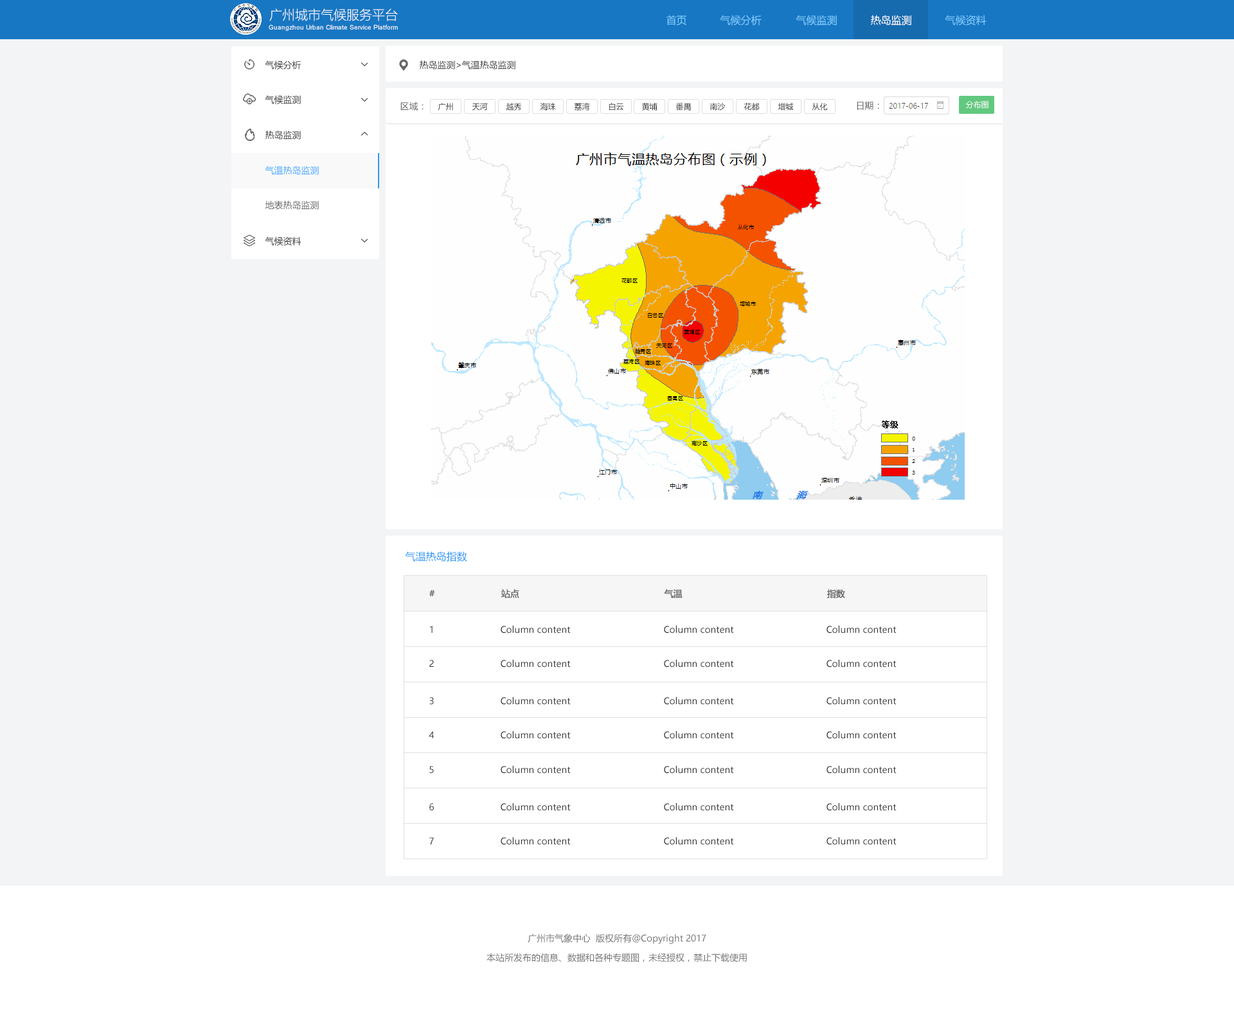
<style>
.page{position:relative;width:1234px;height:1009px;background:#f3f4f5}
.page>*{position:absolute;margin:0}
.t1{font:12.9px "MicrosoftYaHeiLight";color:#ffffff}
.t2{font:10.3px "MicrosoftYaHei";color:#80ceff}
.t3{font:10.3px "MicrosoftYaHei";color:#ffffff}
.t4{font:6.4px "ArialMT";color:#ffffff}
.t5{font:9px "MicrosoftYaHei";color:#333333}
.t6{font:9px "MicrosoftYaHei";color:#666666}
.t7{font:7.7px "MicrosoftYaHei";color:#ffffff}
.t8{font:7.7px "MicrosoftYaHei";color:#333333}
.t9{font:9px "MicrosoftYaHei";color:#3fa9fe}
.t10{font:10.3px "MicrosoftYaHei";color:#2e9af3}
.t11{font:9px "MicrosoftYaHei";color:#666666;font-weight:bold}
.t12{font:9px "MicrosoftYaHei"}
</style>
<div class="page">
<p class="t1" style="left:269px;top:8px;width:129px;height:13px">广州城市气候服务平台</p>
<p class="t2" style="left:667px;top:15px;width:20px;height:11px">首页</p>
<p class="t2" style="left:720px;top:15px;width:42px;height:11px">气候分析</p>
<p class="t2" style="left:796px;top:15px;width:41px;height:11px">气候监测</p>
<p class="t3" style="left:871px;top:15px;width:41px;height:11px">热岛监测</p>
<p class="t2" style="left:945px;top:15px;width:42px;height:11px">气候资料</p>
<p class="t4" style="left:269px;top:24px;width:129px;height:7px">Guangzhou Urban Climate Service Platform</p>
<p class="t5" style="left:265px;top:60px;width:37px;height:9px">气候分析</p>
<p class="t5" style="left:420px;top:60px;width:96px;height:9px">热岛监测&gt;气温热岛监测</p>
<p class="t5" style="left:265px;top:95px;width:36px;height:9px">气候监测</p>
<p class="t6" style="left:401px;top:102px;width:23px;height:9px">区域：</p>
<p class="t6" style="left:857px;top:101px;width:22px;height:9px">日期：</p>
<p class="t7" style="left:966px;top:100px;width:23px;height:9px">分布图</p>
<p class="t8" style="left:438px;top:103px;width:15px;height:8px">广州</p>
<p class="t8" style="left:472px;top:103px;width:16px;height:8px">天河</p>
<p class="t8" style="left:506px;top:103px;width:16px;height:8px">越秀</p>
<p class="t8" style="left:540px;top:103px;width:16px;height:8px">海珠</p>
<p class="t8" style="left:575px;top:103px;width:15px;height:8px">荔湾</p>
<p class="t8" style="left:609px;top:103px;width:15px;height:8px">白云</p>
<p class="t8" style="left:642px;top:103px;width:16px;height:8px">黄埔</p>
<p class="t8" style="left:676px;top:103px;width:15px;height:8px">番禺</p>
<p class="t8" style="left:710px;top:103px;width:16px;height:8px">南沙</p>
<p class="t8" style="left:744px;top:103px;width:16px;height:8px">花都</p>
<p class="t8" style="left:778px;top:103px;width:16px;height:8px">增城</p>
<p class="t8" style="left:812px;top:103px;width:16px;height:8px">从化</p>
<p class="t5" style="left:266px;top:130px;width:35px;height:10px">热岛监测</p>
<p class="t9" style="left:265px;top:166px;width:54px;height:9px">气温热岛监测</p>
<p class="t6" style="left:265px;top:201px;width:54px;height:9px">地表热岛监测</p>
<p class="t5" style="left:265px;top:237px;width:37px;height:9px">气候资料</p>
<p class="t10" style="left:405px;top:551px;width:62px;height:11px">气温热岛指数</p>
<p class="t11" style="left:429px;top:590px;width:6px;height:7px">#</p>
<p class="t11" style="left:501px;top:589px;width:18px;height:9px">站点</p>
<p class="t11" style="left:664px;top:589px;width:19px;height:9px">气温</p>
<p class="t11" style="left:827px;top:589px;width:18px;height:9px">指数</p>
<p class="t12" style="left:430px;top:626px;width:3px;height:7px">1</p>
<p class="t5" style="left:501px;top:625px;width:70px;height:8px">Column content</p>
<p class="t5" style="left:664px;top:625px;width:70px;height:8px">Column content</p>
<p class="t5" style="left:827px;top:625px;width:70px;height:8px">Column content</p>
<p class="t5" style="left:429px;top:660px;width:5px;height:7px">2</p>
<p class="t5" style="left:501px;top:659px;width:70px;height:8px">Column content</p>
<p class="t5" style="left:664px;top:659px;width:70px;height:8px">Column content</p>
<p class="t5" style="left:827px;top:659px;width:70px;height:8px">Column content</p>
<p class="t5" style="left:429px;top:697px;width:5px;height:8px">3</p>
<p class="t5" style="left:501px;top:696px;width:70px;height:9px">Column content</p>
<p class="t5" style="left:664px;top:696px;width:70px;height:9px">Column content</p>
<p class="t5" style="left:827px;top:696px;width:70px;height:9px">Column content</p>
<p class="t5" style="left:429px;top:731px;width:6px;height:7px">4</p>
<p class="t5" style="left:501px;top:730px;width:70px;height:9px">Column content</p>
<p class="t5" style="left:664px;top:730px;width:70px;height:9px">Column content</p>
<p class="t5" style="left:827px;top:730px;width:70px;height:9px">Column content</p>
<p class="t5" style="left:429px;top:766px;width:5px;height:7px">5</p>
<p class="t5" style="left:501px;top:765px;width:70px;height:8px">Column content</p>
<p class="t5" style="left:664px;top:765px;width:70px;height:8px">Column content</p>
<p class="t5" style="left:827px;top:765px;width:70px;height:8px">Column content</p>
<p class="t5" style="left:429px;top:803px;width:5px;height:8px">6</p>
<p class="t5" style="left:501px;top:802px;width:70px;height:9px">Column content</p>
<p class="t5" style="left:664px;top:802px;width:70px;height:9px">Column content</p>
<p class="t5" style="left:827px;top:802px;width:70px;height:9px">Column content</p>
<p class="t5" style="left:429px;top:837px;width:5px;height:7px">7</p>
<p class="t5" style="left:501px;top:836px;width:70px;height:9px">Column content</p>
<p class="t5" style="left:664px;top:836px;width:70px;height:9px">Column content</p>
<p class="t5" style="left:827px;top:836px;width:70px;height:9px">Column content</p>
</div>
